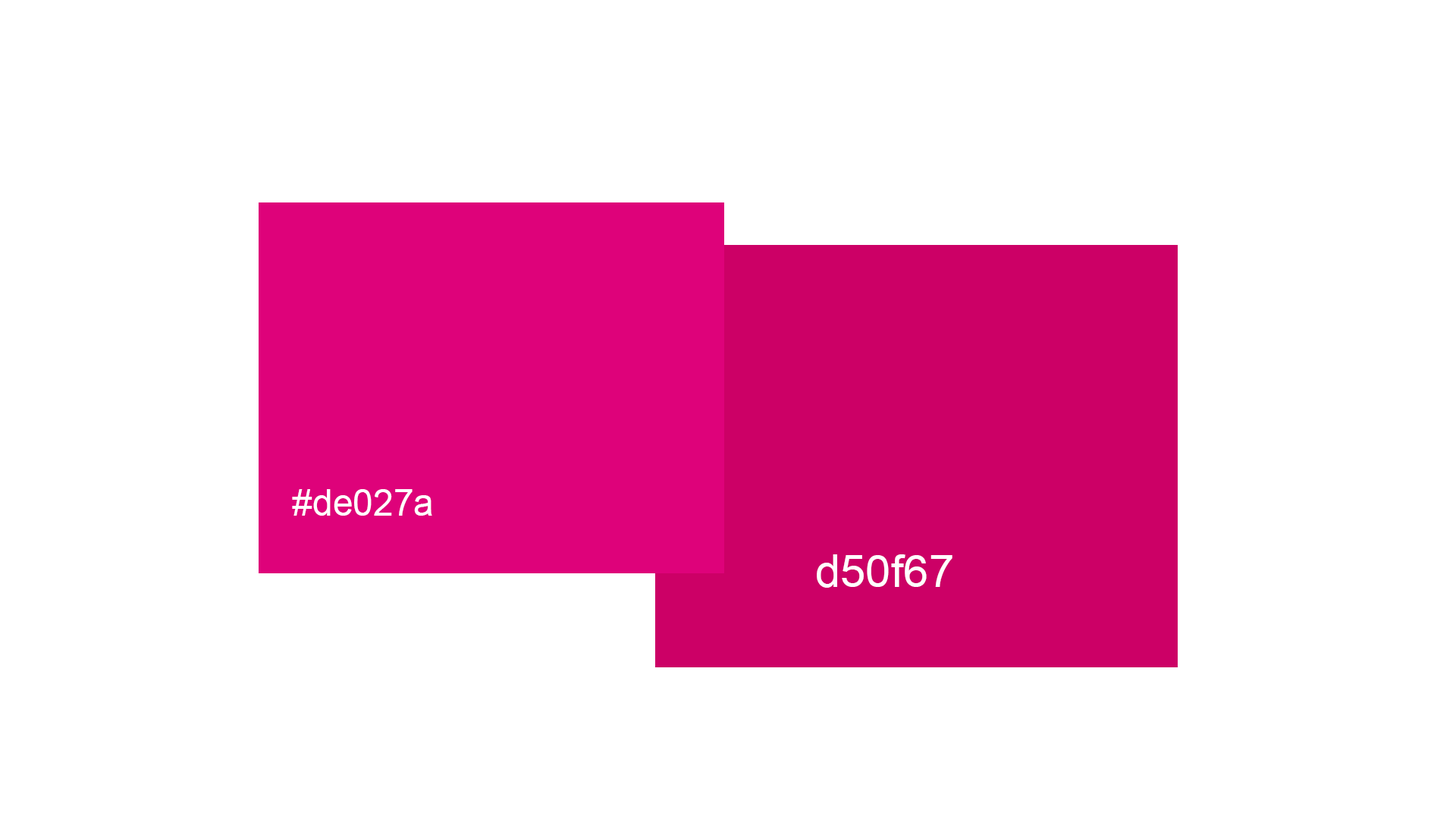
<style>
.page{position:relative;width:1456px;height:819px;background:#ffffff}
.page>*{position:absolute;margin:0}
.t1{font:36.4px "ArialMT";color:#ffffff}
.t2{font:45.5px "ArialMT";color:#ffffff}
</style>
<div class="page">
<p class="t1" style="left:292px;top:489px;width:140px;height:27px">#de027a</p>
<p class="t2" style="left:817px;top:554px;width:135px;height:34px">d50f67</p>
</div>
